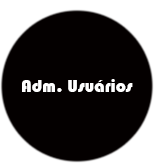
<style>
.page{position:relative;width:154px;height:163px;background:#040000}
.page>*{position:absolute;margin:0}
.t1{font:18px "Bauhaus93";color:#ffffff}
</style>
<div class="page">
<p class="t1" style="left:22px;top:79px;width:111px;height:13px">Adm. Usuários</p>
</div>
